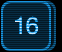
<style>
.page{position:relative;width:62px;height:52px;background:#041926}
.page>*{position:absolute;margin:0}
.t1{font:24px "HelveticaNeue";letter-spacing:0.025em}
</style>
<div class="page">
<p class="t1" style="left:15px;top:16px;width:24px;height:19px">16</p>
</div>
